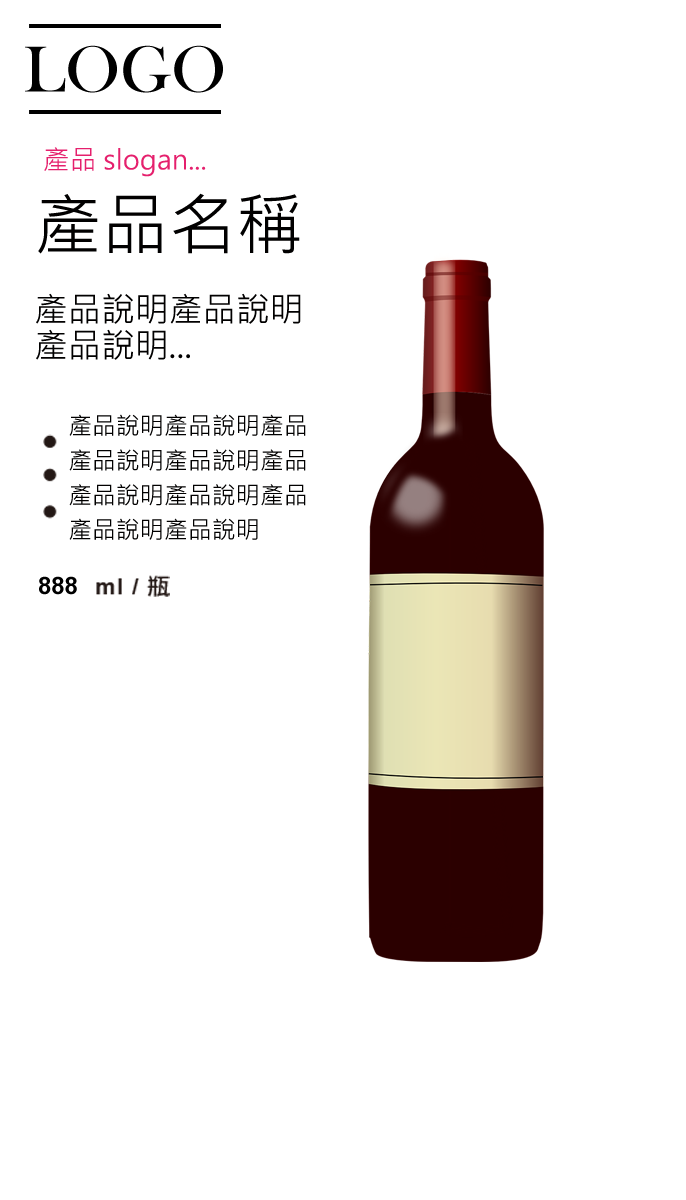
<style>
.page{position:relative;width:686px;height:1200px;background:#ffffff}
.page>*{position:absolute;margin:0}
.t1{font:27px "MicrosoftJhengHeiUIRegular";color:#e5206d}
.t2{font:33.7px/36px "MicrosoftJhengHeiUIRegular";color:#010000}
.t3{font:67.4px/27px "MicrosoftJhengHeiUIRegular";color:#010000}
.t4{font:24px/34.6px "MicrosoftJhengHeiUIRegular";color:#010000}
.t5{font:24px "Arial-BoldMT";color:#000000}
</style>
<div class="page">
<p class="t1" style="left:44px;top:147px;width:162px;height:30px">產品 slogan...</p>
<p class="t2" style="left:36px;top:193px;width:265px;height:167px"><span class="t3">產品名稱<br></span><br>產品說明產品說明<br>產品說明...</p>
<p class="t4" style="left:69px;top:414px;width:237px;height:126px">產品說明產品說明產品<br>產品說明產品說明產品<br>產品說明產品說明產品<br>產品說明產品說明</p>
<p class="t5" style="left:39px;top:576px;width:38px;height:19px">888</p>
</div>
